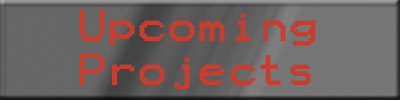
<style>
.page{position:relative;width:400px;height:100px}
.page>*{position:absolute;margin:0}
.t1{font:36.5px "Terminal";color:#c63e30;scale:1.1 1}
</style>
<div class="page">
<p class="t1" style="left:79px;top:9px;width:237px;height:81px;text-align:center">Upcoming <br>Projects</p>
</div>
